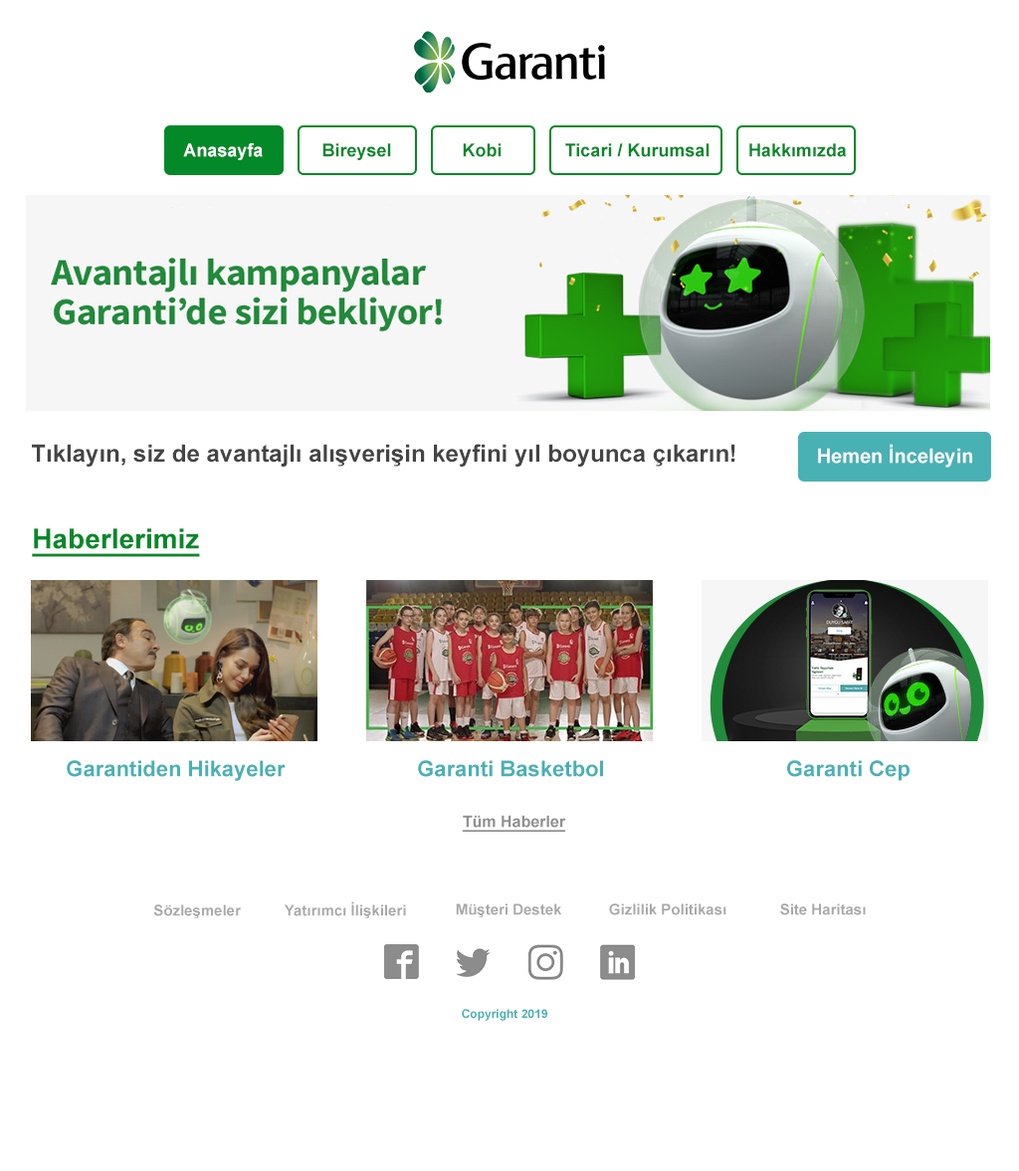
<style>
.page{position:relative;width:1019px;height:1171px;background:#ffffff}
.page>*{position:absolute;margin:0}
.t1{font:17.9px "Arial-BoldMT";color:#ffffff}
.t2{font:17.9px "Arial-BoldMT";color:#038928}
.t3{font:23.9px "Arial-BoldMT";color:#444444}
.t4{font:19.9px "Arial-BoldMT";color:#ffffff}
.t5{font:27.9px "Arial-BoldMT";color:#038928;text-decoration:underline}
.t6{font:21.9px "Arial-BoldMT";color:#48b1b4}
.t7{font:15.9px "Arial-BoldMT";color:#8f8f8f;text-decoration:underline}
.t8{font:14.9px "Arial-BoldMT";color:#a8a8a8}
.t9{font:11.9px "Arial-BoldMT";color:#48b1b4}
</style>
<div class="page">
<p class="t1" style="left:183px;top:143px;width:80px;height:17px">Anasayfa</p>
<p class="t2" style="left:322px;top:143px;width:69px;height:17px">Bireysel</p>
<p class="t2" style="left:463px;top:143px;width:38px;height:14px">Kobi</p>
<p class="t2" style="left:565px;top:143px;width:144px;height:14px">Ticari / Kurumsal</p>
<p class="t2" style="left:749px;top:143px;width:97px;height:14px">Hakkımızda</p>
<p class="t3" style="left:32px;top:444px;width:703px;height:22px">Tıklayın, siz de avantajlı alışverişin keyfini yıl boyunca çıkarın!</p>
<p class="t4" style="left:818px;top:444px;width:154px;height:23px">Hemen İnceleyin</p>
<p class="t5" style="left:32px;top:528px;width:168px;height:29px">Haberlerimiz</p>
<p class="t6" style="left:67px;top:760px;width:218px;height:21px">Garantiden Hikayeler</p>
<p class="t6" style="left:418px;top:760px;width:185px;height:17px">Garanti Basketbol</p>
<p class="t6" style="left:787px;top:760px;width:122px;height:21px">Garanti Cep</p>
<p class="t7" style="left:462px;top:815px;width:104px;height:17px">Tüm Haberler</p>
<p class="t8" style="left:153px;top:904px;width:88px;height:14px">Sözleşmeler</p>
<p class="t8" style="left:284px;top:901px;width:122px;height:17px">Yatırımcı İlişkileri</p>
<p class="t8" style="left:456px;top:903px;width:105px;height:14px">Müşteri Destek</p>
<p class="t8" style="left:609px;top:903px;width:117px;height:12px">Gizlilik Politikası</p>
<p class="t8" style="left:780px;top:903px;width:85px;height:12px">Site Haritası</p>
<p class="t9" style="left:462px;top:1009px;width:85px;height:12px">Copyright 2019</p>
</div>
